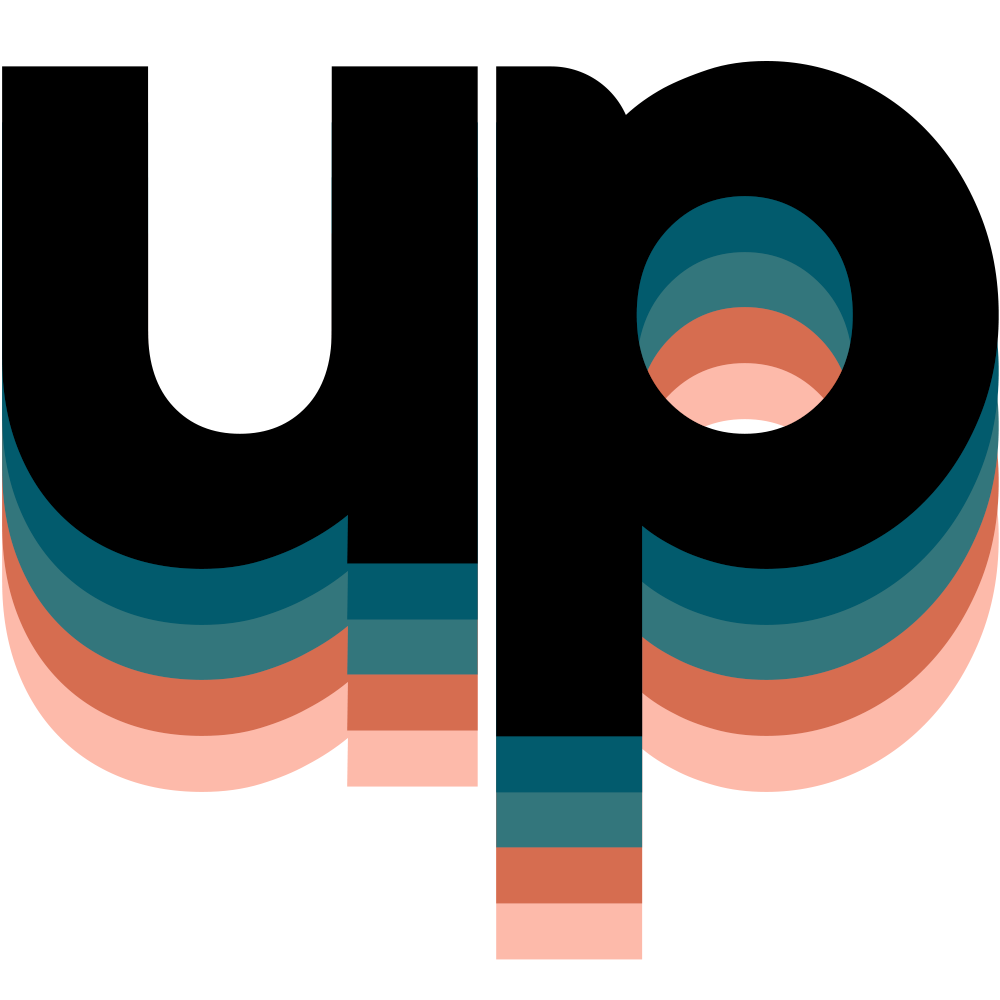
<style>
.page{position:relative;width:1000px;height:1000px;background:#000000}
.page>*{position:absolute;margin:0}
.t1{font:1004.3px "KinsansBold";letter-spacing:-0.08em;color:#000000}
.t2{font:1004.3px "KinsansBold";letter-spacing:-0.08em}
</style>
<div class="page">
<p class="t1" style="left:2px;top:61px;width:997px;height:676px">up</p>
<p class="t1" style="left:2px;top:117px;width:997px;height:676px">up</p>
<p class="t2" style="left:2px;top:172px;width:997px;height:676px">up</p>
<p class="t2" style="left:2px;top:228px;width:997px;height:676px">up</p>
<p class="t2" style="left:2px;top:284px;width:997px;height:676px">up</p>
</div>
